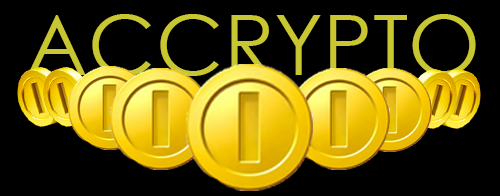
<style>
.page{position:relative;width:500px;height:196px;background:#000000}
.page>*{position:absolute;margin:0}
.t1{font:83.3px "CenturyGothic";color:#c9c732}
</style>
<div class="page">
<p class="t1" style="left:28px;top:14px;width:448px;height:62px">ACCRYPTO</p>
</div>
